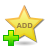
<style>
.page{position:relative;width:48px;height:48px;background:#ffffff}
.page>*{position:absolute;margin:0}
.t1{font:10px "Calibri";color:#9d8242;font-variant:small-caps}
</style>
<div class="page">
<p class="t1" style="left:16px;top:23px;width:17px;height:5px">add</p>
</div>
